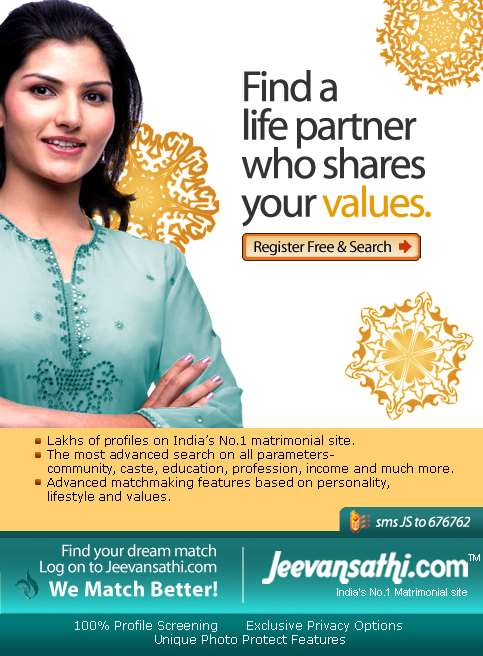
<style>
.page{position:relative;width:483px;height:656px;background:#ffffff}
.page>*{position:absolute;margin:0}
.t1{font:43.7px/38.5px "Myriad-Roman";letter-spacing:-0.05em;color:#333333}
.t2{font:43.7px/38.5px "Myriad-Roman";letter-spacing:-0.05em;color:#ea9c05}
.t3{font:16px "Myriad-Roman";letter-spacing:-0.025em;color:#000000}
.t4{font:12px/14px "Verdana";color:#000000}
.t5{font:14.9px "Myriad-Italic";letter-spacing:-0.025em;color:#ffffff}
.t6{font:17px/15.9px "Myriad-Roman";letter-spacing:-0.025em;color:#ffffff}
.t7{font:9px "ArialMT";color:#ffffff}
.t8{font:21.9px "Myriad-Bold";letter-spacing:0.01em;color:#ffffff}
.t9{font:17.9px "Myriad-Bold";letter-spacing:-0.025em;color:#333333}
.t10{font:11px "ArialMT";color:#ffffff}
.t11{font:12px/14px "Verdana";color:#ffffff}
</style>
<div class="page">
<p class="t1" style="left:241px;top:70px;width:190px;height:157px">Find a <br>life partner <br>who shares <br>your <span class="t2">values.</span></p>
<p class="t3" style="left:254px;top:240px;width:137px;height:16px">Register Free &amp; Search</p>
<p class="t4" style="left:47px;top:435px;width:406px;height:68px">Lakhs of profiles on India’s No.1 matrimonial site.<br>The most advanced search on all parameters- <br>community, caste, education, profession, income and much more.<br>Advanced matchmaking features based on personality,      <br>lifestyle and values.</p>
<p class="t5" style="left:375px;top:516px;width:96px;height:11px">sms JS to 676762</p>
<p class="t6" style="left:40px;top:544px;width:177px;height:32px;text-align:right">Find your dream match<br>Log on to Jeevansathi.com</p>
<p class="t7" style="left:468px;top:554px;width:12px;height:7px">TM</p>
<p class="t8" style="left:49px;top:580px;width:169px;height:17px"><span class="t9"><br></span>We Match Better!</p>
<p class="t10" style="left:337px;top:588px;width:130px;height:8px">India’s No.1 Matrimonial site</p>
<p class="t11" style="left:75px;top:620px;width:327px;height:26px;text-align:center">100% Profile Screening       Exclusive Privacy Options       <br>Unique Photo Protect Features</p>
</div>
